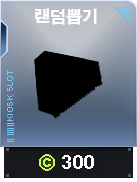
<style>
.page{position:relative;width:137px;height:182px}
.page>*{position:absolute;margin:0}
.t1{font:16px "H2gtrE";color:#ffffff}
.t2{font:18px "H2gtrE";color:#ffffff}
</style>
<div class="page">
<p class="t1" style="left:35px;top:8px;width:62px;height:17px">랜덤뽑기</p>
<p class="t2" style="left:62px;top:155px;width:32px;height:14px">300</p>
</div>
